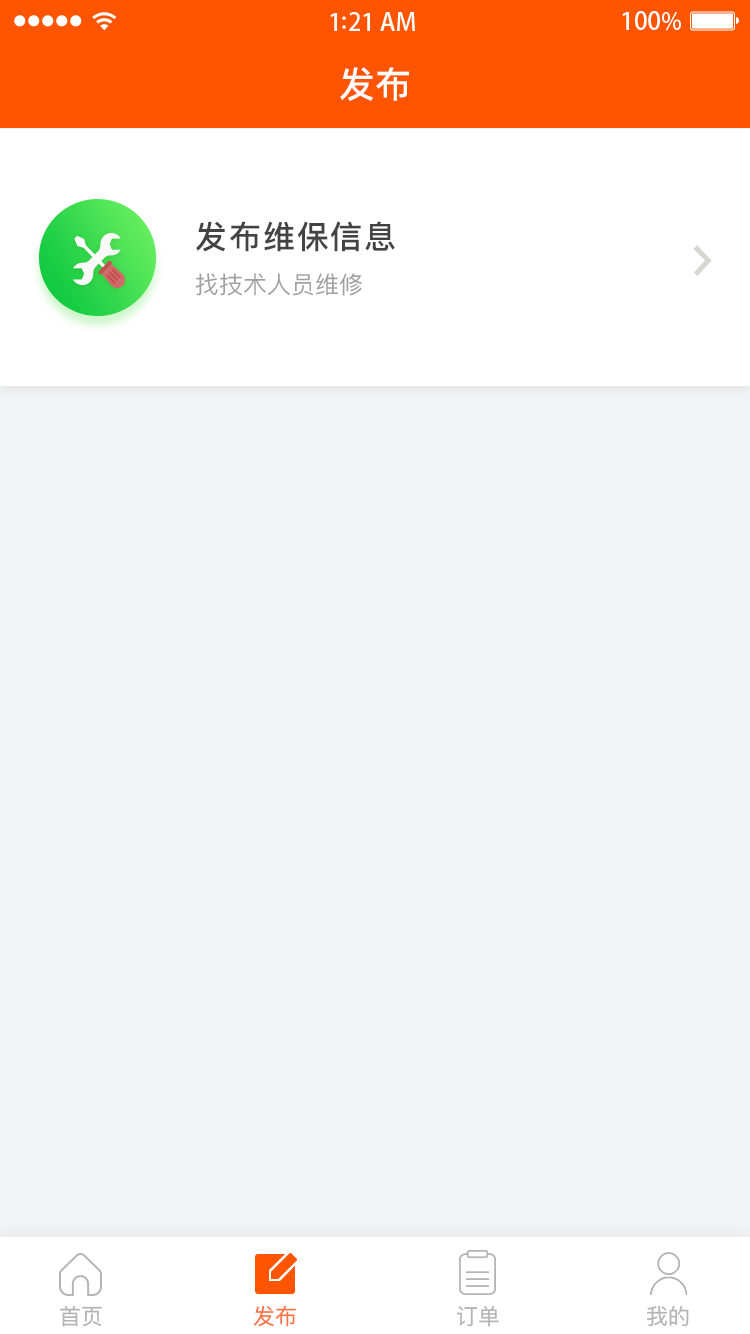
<style>
.page{position:relative;width:750px;height:1334px;background:#f2f5f7}
.page>*{position:absolute;margin:0}
.t1{font:36px "PingFangSC-Medium";color:#ffffff}
.t2{font:32px "PingFangSC-Medium";letter-spacing:0.06em;color:#434343}
.t3{font:24px "PingFangSC-Regular";color:#a0a0a0}
.t4{font:22px "PingFangSC-Regular";color:#b4b4b4}
.t5{font:22px "PingFangSC-Regular";color:#ff7342}
</style>
<div class="page">
<p class="t1" style="left:340px;top:67px;width:69px;height:34px">发布</p>
<p class="t2" style="left:196px;top:221px;width:199px;height:31px">发布维保信息</p>
<p class="t3" style="left:196px;top:273px;width:166px;height:23px">找技术人员维修</p>
<p class="t4" style="left:60px;top:1305px;width:42px;height:22px">首页</p>
<p class="t5" style="left:253px;top:1305px;width:43px;height:22px">发布</p>
<p class="t4" style="left:456px;top:1305px;width:43px;height:22px">订单</p>
<p class="t4" style="left:647px;top:1305px;width:42px;height:21px">我的</p>
</div>
